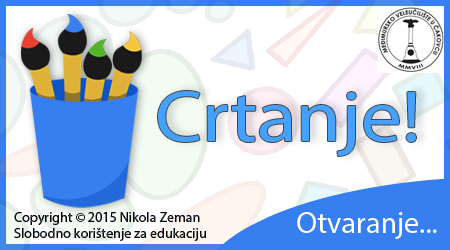
<style>
.page{position:relative;width:450px;height:250px;background:#ffffff}
.page>*{position:absolute;margin:0}
.t1{font:72px "MyriadPro-Regular";color:#45a1ff;scale:1.13 1}
.t2{font:14px "MyriadPro-Regular";color:#000000}
.t3{font:30px "MyriadPro-Regular";color:#ffffff}
</style>
<div class="page">
<p class="t1" style="left:158px;top:91px;width:258px;height:65px">Crtanje!</p>
<p class="t2" style="left:14px;top:212px;width:192px;height:29px">Copyright © 2015 Nikola Zeman<br>Slobodno korištenje za edukaciju</p>
<p class="t3" style="left:297px;top:212px;width:140px;height:27px">Otvaranje...</p>
</div>
